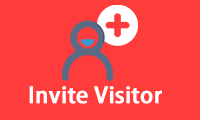
<style>
.page{position:relative;width:200px;height:120px;background:#ff3c3c}
.page>*{position:absolute;margin:0}
.t1{font:22px "AdobeHeitiStd-Regular";color:#ffffff;font-weight:bold}
</style>
<div class="page">
<p class="t1" style="left:29px;top:86px;width:133px;height:18px">Invite Visitor</p>
</div>
